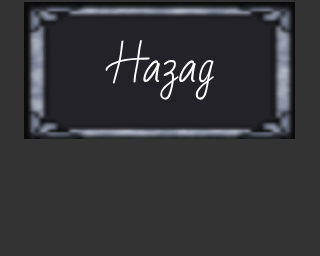
<style>
.page{position:relative;width:320px;height:256px;background:#333333}
.page>*{position:absolute;margin:0}
.t1{font:43px "BadScript-Regular";color:#ffffff}
</style>
<div class="page">
<p class="t1" style="left:105px;top:39px;width:109px;height:61px">Назад</p>
</div>
